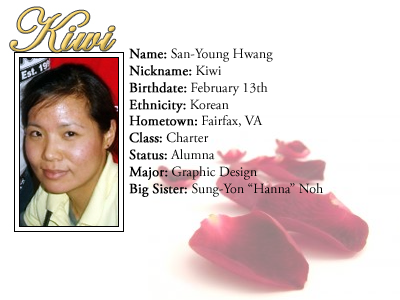
<style>
.page{position:relative;width:400px;height:300px;background:#ffffff}
.page>*{position:absolute;margin:0}
.t1{font:14px "AGaramondPro-Regular";color:#000000}
.t2{font:14px "AGaramondPro-Regular";color:#000000;font-weight:bold}
</style>
<div class="page">
<p class="t1" style="left:129px;top:48px;width:194px;height:149px"><span class="t2">Name:</span> San-Young Hwang<br><span class="t2">Nickname:</span> Kiwi<br><span class="t2">Birthdate:</span> February 13th<br><span class="t2">Ethnicity:</span> Korean<br><span class="t2">Hometown:</span> Fairfax, VA<br><span class="t2">Class:</span> Charter<br><span class="t2">Status:</span> Alumna<br><span class="t2">Major:</span> Graphic Design<br><span class="t2">Big Sister: </span>Sung-Yon “Hanna” Noh</p>
</div>
